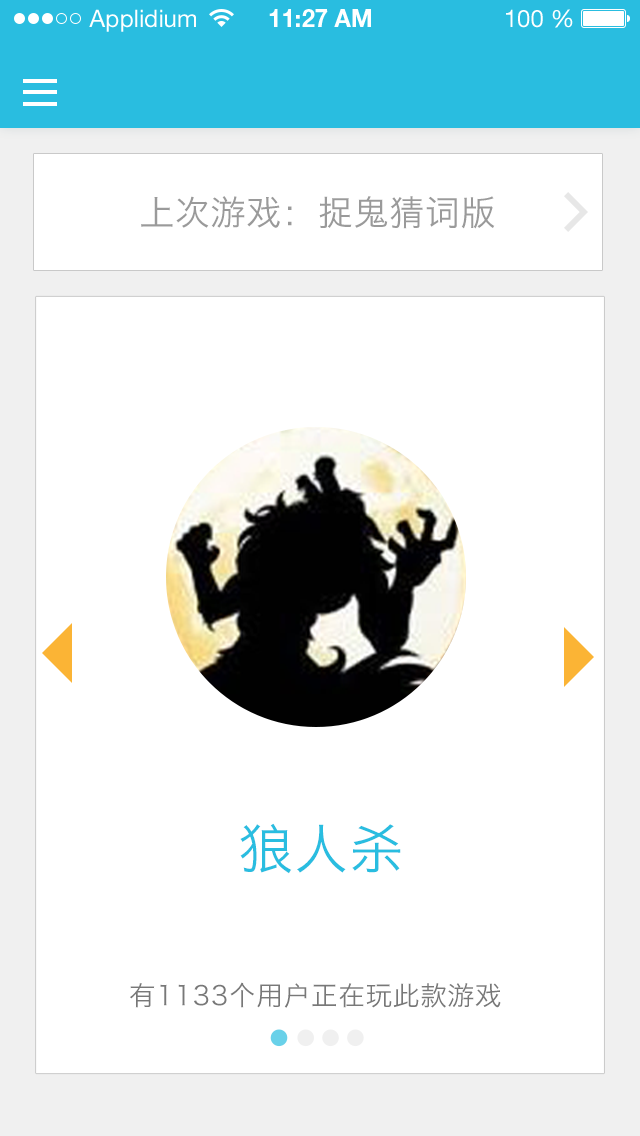
<style>
.page{position:relative;width:640px;height:1136px;background:#ffffff}
.page>*{position:absolute;margin:0}
.t1{font:34.8px "HiraginoSansGB-W3";letter-spacing:0.025em;color:#9a9a9a}
.t2{font:54px "HiraginoSansGB-W3";letter-spacing:0.025em;color:#29bde0}
.t3{font:26.6px "HiraginoSansGB-W3";letter-spacing:0.025em;color:#787878}
</style>
<div class="page">
<p class="t1" style="left:141px;top:196px;width:354px;height:33px">上次游戏：捉鬼猜词版</p>
<p class="t2" style="left:240px;top:823px;width:161px;height:51px">狼人杀</p>
<p class="t3" style="left:130px;top:982px;width:371px;height:26px">有1133个用户正在玩此款游戏</p>
</div>
